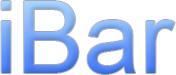
<style>
.page{position:relative;width:176px;height:75px;background:#ffffff}
.page>*{position:absolute;margin:0}
.t1{font:100px "ArialMT"}
</style>
<div class="page">
<p class="t1" style="left:1px;top:1px;width:174px;height:73px">iBar</p>
</div>
